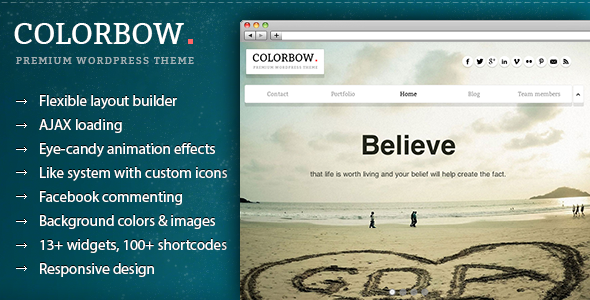
<style>
.page{position:relative;width:590px;height:300px}
.page>*{position:absolute;margin:0}
.t1{font:30px "Bitter-Regular";letter-spacing:-0.01em;color:#ffffff;text-transform:uppercase}
.t2{font:10px "Bitter-Regular";letter-spacing:0.13em;color:#a4b2b6;text-transform:uppercase}
.t3{font:15px/24px "MyriadPro-Regular";color:#ffffff}
</style>
<div class="page">
<p class="t1" style="left:14px;top:23px;width:170px;height:21px">colorbow</p>
<p class="t2" style="left:16px;top:57px;width:178px;height:7px">Premium WordPress Theme</p>
<p class="t3" style="left:39px;top:95px;width:188px;height:182px">Flexible layout builder<br>AJAX loading <br>Eye-candy animation effects<br>Like system with custom icons<br>Facebook commenting<br>Background colors &amp; images<br>13+ widgets, 100+ shortcodes<br>Responsive design</p>
</div>
